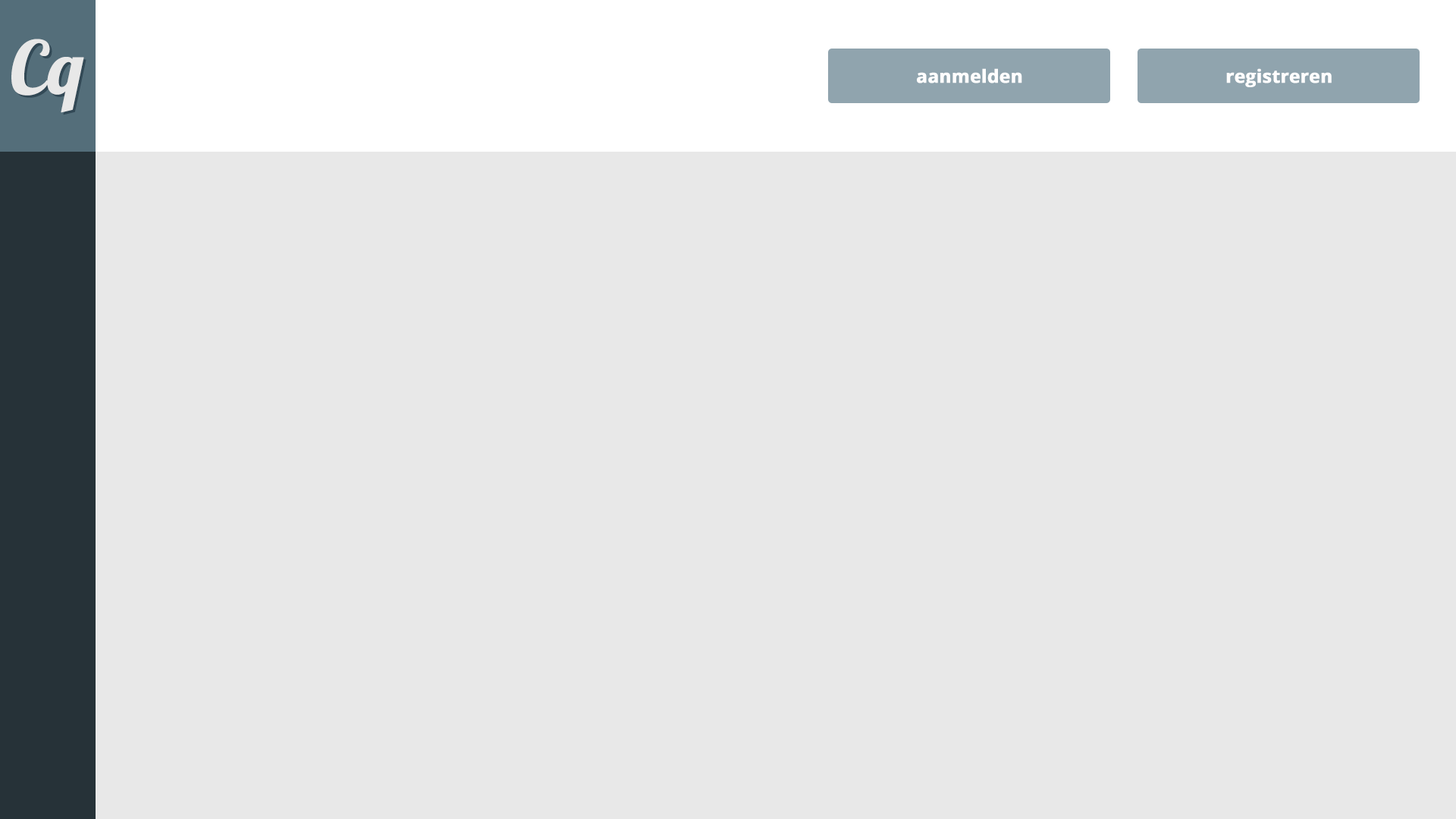
<style>
.page{position:relative;width:1456px;height:819px;background:#e8e8e8}
.page>*{position:absolute;margin:0}
.t1{font:72.8px "Lobster1.4";color:#e8e8e8;font-weight:bold}
.t2{font:18.2px "OpenSans-Bold";color:#fffefe;font-weight:bold}
</style>
<div class="page">
<p class="t1" style="left:11px;top:39px;width:73px;height:74px">Cq</p>
<p class="t2" style="left:917px;top:68px;width:105px;height:15px">aanmelden</p>
<p class="t2" style="left:1226px;top:68px;width:106px;height:19px">registreren</p>
</div>
